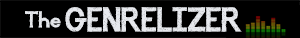
<style>
.page{position:relative;width:300px;height:38px;background:#000000}
.page>*{position:absolute;margin:0}
.t1{font:16.6px "Illuminate";color:#e7e9ee}
.t2{font:24.9px "Illuminate";color:#e7e9ee}
</style>
<div class="page">
<p class="t1" style="left:25px;top:11px;width:36px;height:17px">The</p>
<p class="t2" style="left:65px;top:7px;width:177px;height:25px">GENRELIZER</p>
</div>
